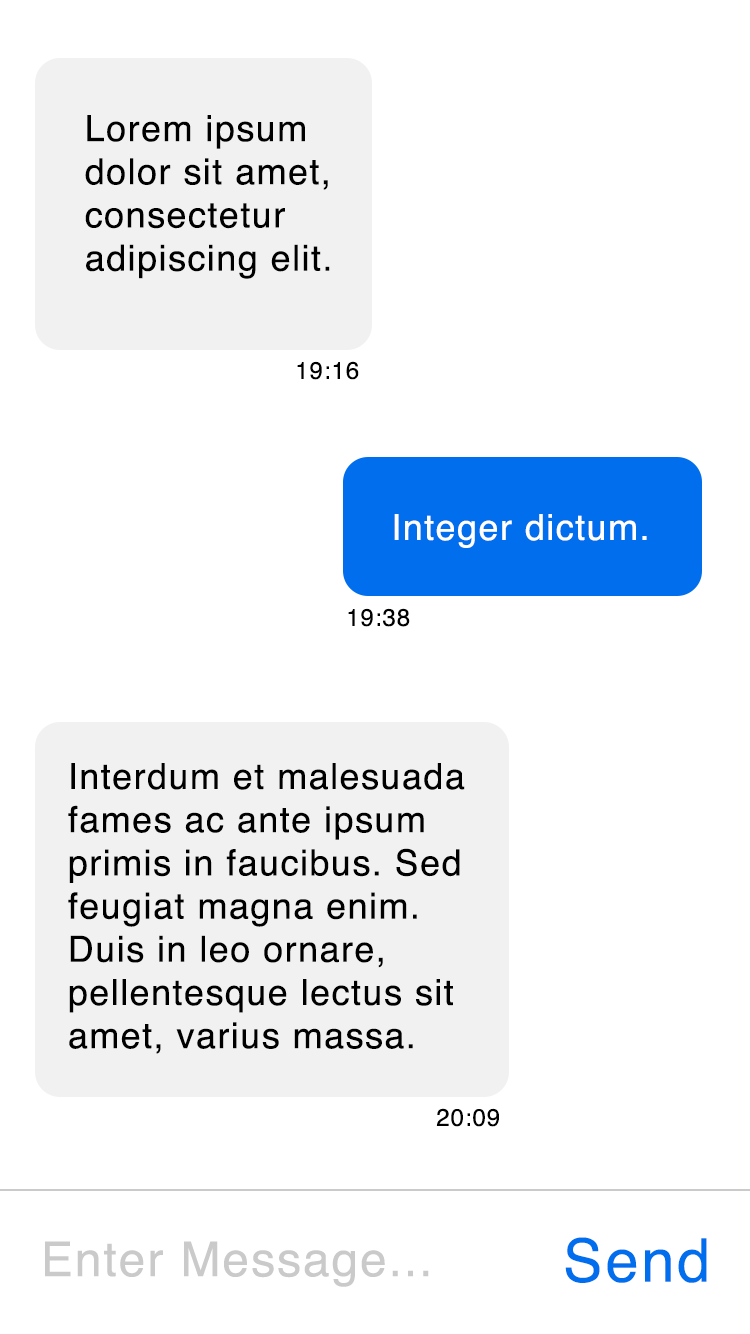
<style>
.page{position:relative;width:750px;height:1334px;background:#ffffff}
.page>*{position:absolute;margin:0}
.t1{font:36px "Helvetica";letter-spacing:0.04em;color:#000000}
.t2{font:24px "Helvetica";letter-spacing:0.04em;color:#000000}
.t3{font:36px "Helvetica";letter-spacing:0.04em;color:#ffffff}
.t4{font:48px "Helvetica";letter-spacing:0.04em;color:#cacaca}
.t5{font:60px "Helvetica";letter-spacing:0.04em;color:#006eed}
</style>
<div class="page">
<p class="t1" style="left:85px;top:115px;width:245px;height:164px">Lorem ipsum<br>dolor sit amet, <br>consectetur <br>adipiscing elit.</p>
<p class="t2" style="left:297px;top:361px;width:62px;height:19px">19:16</p>
<p class="t3" style="left:394px;top:514px;width:253px;height:34px">Integer dictum.</p>
<p class="t2" style="left:348px;top:608px;width:62px;height:19px">19:38</p>
<p class="t1" style="left:68px;top:763px;width:397px;height:291px">Interdum et malesuada<br>fames ac ante ipsum<br>primis in faucibus. Sed<br>feugiat magna enim. <br>Duis in leo ornare, <br>pellentesque lectus sit <br>amet, varius massa.</p>
<p class="t2" style="left:436px;top:1108px;width:63px;height:19px">20:09</p>
<p class="t4" style="left:45px;top:1241px;width:384px;height:46px">Enter Message...</p>
<p class="t5" style="left:565px;top:1237px;width:142px;height:46px">Send</p>
</div>
